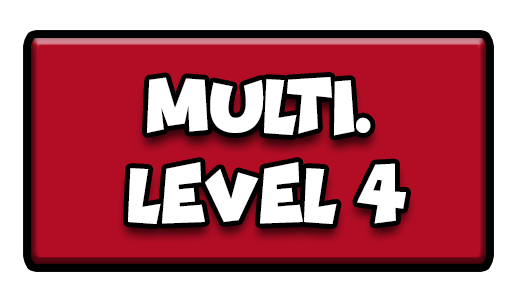
<style>
.page{position:relative;width:517px;height:301px;background:#ffffff}
.page>*{position:absolute;margin:0}
.t1{font:77.7px "Funhouse";color:#ffffff;scale:0.95 1}
</style>
<div class="page">
<p class="t1" style="left:147px;top:77px;width:224px;height:59px">MULTI.</p>
<p class="t1" style="left:128px;top:162px;width:278px;height:62px">LEVEL 4</p>
</div>
